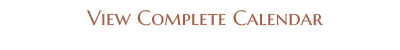
<style>
.page{position:relative;width:400px;height:50px;background:#ffffff}
.page>*{position:absolute;margin:0}
.t1{font:20.8px "MarcellusSC-Regular";color:#a4624b}
</style>
<div class="page">
<p class="t1" style="left:86px;top:10px;width:237px;height:16px">View Complete Calendar</p>
</div>
